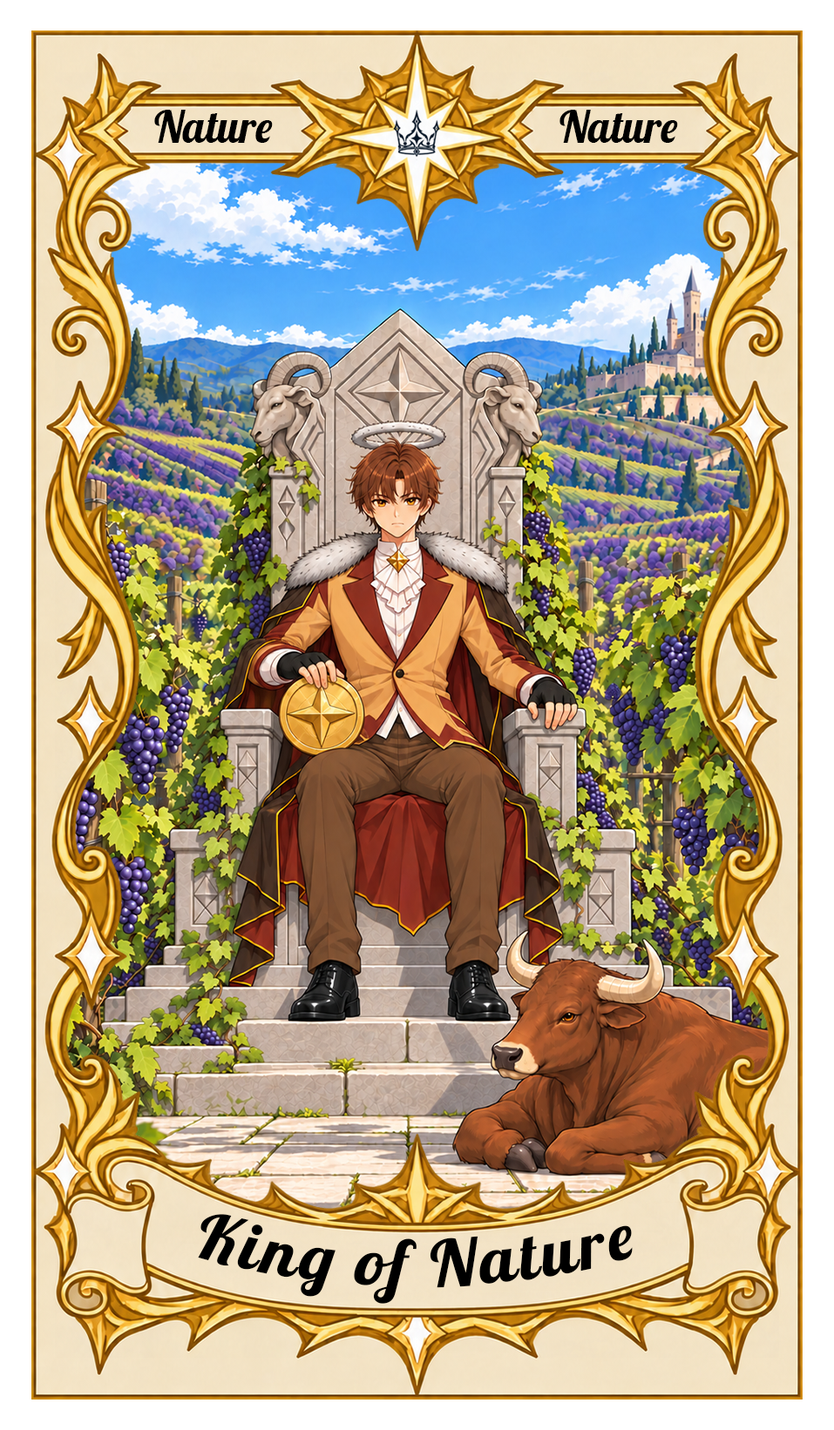
<style>
.page{position:relative;width:834px;height:1430px}
.page>*{position:absolute;margin:0}
.t1{font:43.6px "Lobster-Regular";color:#000000}
.t2{font:65.3px "Lobster-Regular";letter-spacing:0.05em;color:#000000}
</style>
<div class="page">
<p class="t1" style="left:154px;top:110px;width:119px;height:33px">Nature</p>
<p class="t1" style="left:559px;top:110px;width:119px;height:33px">Nature</p>
<p class="t2" style="left:198px;top:1214px;width:434px;height:90px">King of Nature</p>
</div>
